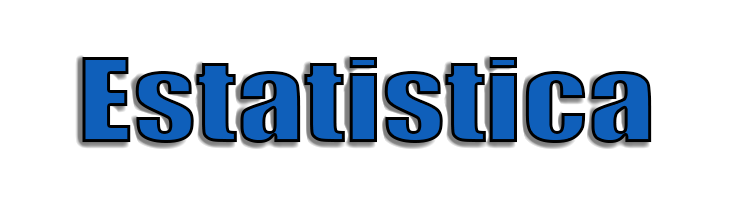
<style>
.page{position:relative;width:733px;height:223px;background:#ffffff}
.page>*{position:absolute;margin:0}
.t1{font:106.9px "Impact";scale:1.25 1}
</style>
<div class="page">
<p class="t1" style="left:82px;top:57px;width:570px;height:86px">Estatistica</p>
</div>
